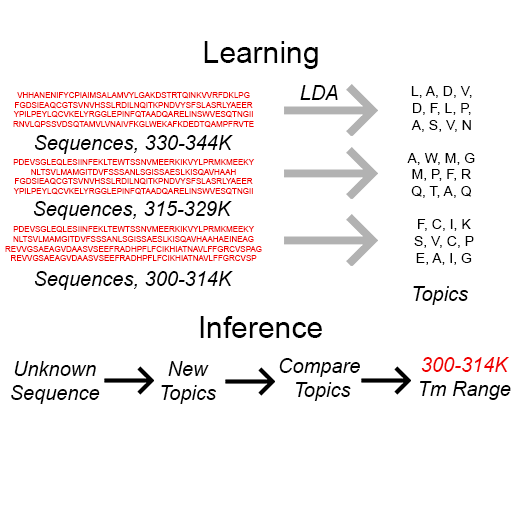
<style>
.page{position:relative;width:512px;height:512px;background:#ffffff}
.page>*{position:absolute;margin:0}
.t1{font:30px "ArialMT";color:#000000}
.t2{font:20px "Arial-ItalicMT";color:#000000}
.t3{font:14px "ArialMT";color:#000000}
.t4{font:8px "ArialMT";color:#f00000}
.t5{font:16px "CgPhenixAmerican";color:#f02d5a}
.t6{font:20px "Arial-ItalicMT";color:#f00000}
</style>
<div class="page">
<p class="t1" style="left:204px;top:41px;width:114px;height:28px">Learning</p>
<p class="t2" style="left:300px;top:85px;width:38px;height:15px">LDA</p>
<p class="t3" style="left:411px;top:86px;width:61px;height:46px;text-align:center">L, A, D, V,<br>D, F, L, P,<br>A, S, V, N</p>
<p class="t4" style="left:5px;top:92px;width:257px;height:169px;text-align:center"><span class="t5"><br></span>VHHANENIFYCPIAIMSALAMVYLGAKDSTRTQINKVVRFDKLPG<br>FGDSIEAQCGTSVNVHSSLRDILNQITKPNDVYSFSLASRLYAEER<br>YPILPEYLQCVKELYRGGLEPINFQTAADQARELINSWVESQTNGII<br>RNVLQPSSVDSQTAMVLVNAIVFKGLWEKAFKDEDTQAMPFRVTE<br><br><br><br>PDEVSGLEQLESIINFEKLTEWTSSNVMEERKIKVYLPRMKMEEKY<br>NLTSVLMAMGITDVFSSSANLSGISSAESLKISQAVHAAH<br>FGDSIEAQCGTSVNVHSSLRDILNQITKPNDVYSFSLASRLYAEER<br>YPILPEYLQCVKELYRGGLEPINFQTAADQARELINSWVESQTNGII<br><br><br><br>PDEVSGLEQLESIINFEKLTEWTSSNVMEERKIKVYLPRMKMEEKY<br>NLTSVLMAMGITDVFSSSANLSGISSAESLKISQAVHAAHAEINEAG<br>REVVGSAEAGVDAASVSEEFRADHPFLFCIKHIATNAVLFFGRCVSPAG<br>REVVGSAEAGVDAASVSEEFRADHPFLFCIKHIATNAVLFFGRCVSP</p>
<p class="t2" style="left:34px;top:135px;width:199px;height:19px">Sequences, 330-344K</p>
<p class="t3" style="left:407px;top:153px;width:68px;height:45px;text-align:center">A, W, M, G<br>M, P, F, R<br>Q, T, A, Q</p>
<p class="t2" style="left:33px;top:201px;width:199px;height:19px">Sequences, 315-329K</p>
<p class="t3" style="left:414px;top:219px;width:60px;height:46px;text-align:center">F, C, I, K<br>S, V, C, P<br>E, A, I, G</p>
<p class="t2" style="left:34px;top:271px;width:199px;height:19px">Sequences, 300-314K</p>
<p class="t2" style="left:413px;top:286px;width:55px;height:19px">Topics</p>
<p class="t1" style="left:200px;top:316px;width:122px;height:22px">Inference</p>
<p class="t2" style="left:11px;top:361px;width:89px;height:43px;text-align:center">Unknown<br>Sequence</p>
<p class="t2" style="left:161px;top:361px;width:55px;height:43px;text-align:center">New<br>Topics</p>
<p class="t2" style="left:279px;top:358px;width:81px;height:43px;text-align:center">Compare <br>Topics</p>
<p class="t6" style="left:420px;top:357px;width:91px;height:43px;text-align:center">300-314K<br><span class="t2">Tm Range</span></p>
</div>
